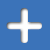
<style>
.page{position:relative;width:50px;height:50px;background:#3b73b9}
.page>*{position:absolute;margin:0}
.t1{font:72px "GEInspira-Bold";color:#fefefe}
</style>
<div class="page">
<p class="t1" style="left:6px;top:8px;width:36px;height:35px">+</p>
</div>
